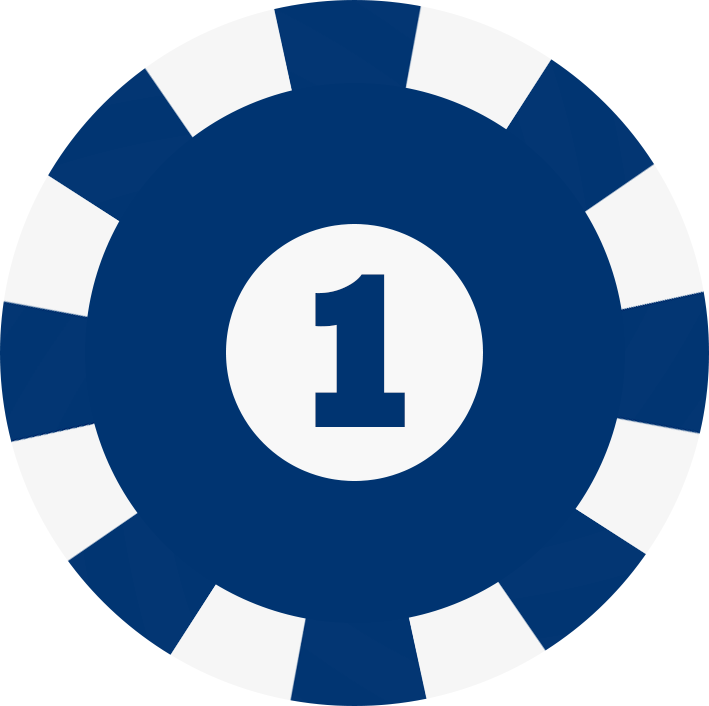
<style>
.page{position:relative;width:709px;height:706px;background:#003471}
.page>*{position:absolute;margin:0}
.t1{font:219.8px "Rockwell-ExtraBold";color:#003471}
</style>
<div class="page">
<p class="t1" style="left:315px;top:274px;width:90px;height:153px">1</p>
</div>
